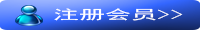
<style>
.page{position:relative;width:200px;height:30px}
.page>*{position:absolute;margin:0}
.t1{font:13px "SimHei";color:#ffffff;scale:2 1}
</style>
<div class="page">
<p class="t1" style="left:54px;top:8px;width:129px;height:13px">注册会员&gt;&gt;</p>
</div>
